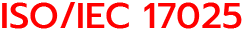
<style>
.page{position:relative;width:245px;height:32px;background:#ffffff}
.page>*{position:absolute;margin:0}
.t1{font:36px "Prompt-Medium";color:#fe0000}
</style>
<div class="page">
<p class="t1" style="left:2px;top:2px;width:240px;height:27px">ISO/IEC 17025</p>
</div>
